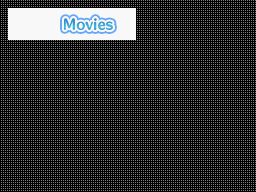
<style>
.page{position:relative;width:256px;height:192px;background:#000000}
.page>*{position:absolute;margin:0}
.t1{font:13.3px "HummingStd-E";letter-spacing:0.025em;color:#3ca5d4;scale:0.95 1}
</style>
<div class="page">
<p class="t1" style="left:64px;top:18px;width:49px;height:12px">Movies</p>
</div>
